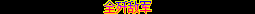
<style>
.page{position:relative;width:255px;height:14px;background:#000000}
.page>*{position:absolute;margin:0}
.t1{font:12px "SimSun"}
</style>
<div class="page">
<p class="t1" style="left:103px;top:0px;width:47px;height:12px">全歼敌军</p>
</div>
